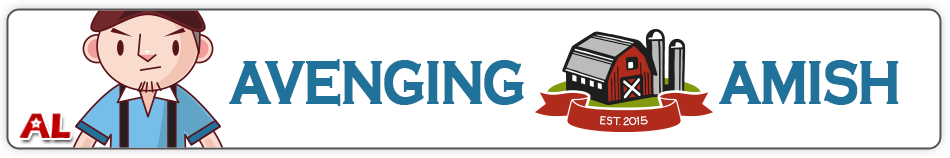
<style>
.page{position:relative;width:950px;height:158px;background:#ffffff}
.page>*{position:absolute;margin:0}
.t1{font:63px "CopperplateGothic-Bold";letter-spacing:-0.05em;color:#20729a;text-transform:uppercase;font-weight:bold;scale:0.8 1}
.t2{font:12px "CopperplateGothic-Light";letter-spacing:-0.05em;color:#ffffff;text-transform:uppercase;scale:0.8 1}
</style>
<div class="page">
<p class="t1" style="left:229px;top:59px;width:670px;height:47px">AVENGING                 AMISH</p>
<p class="t2" style="left:600px;top:116px;width:48px;height:10px">EST. 2015</p>
</div>
